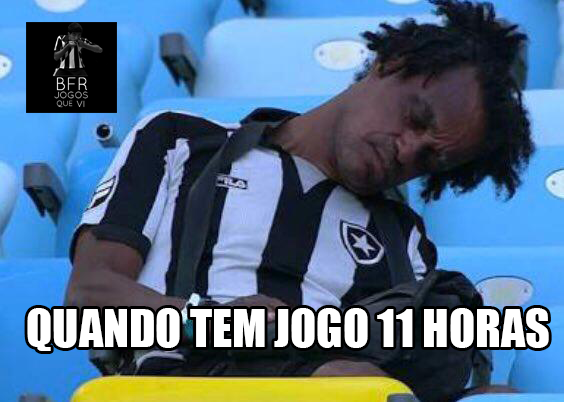
<style>
.page{position:relative;width:564px;height:402px}
.page>*{position:absolute;margin:0}
.t1{font:47.6px "Impact";color:#ffffff}
</style>
<div class="page">
<p class="t1" style="left:27px;top:308px;width:522px;height:43px">QUANDO TEM JOGO 11 HORAS</p>
</div>
